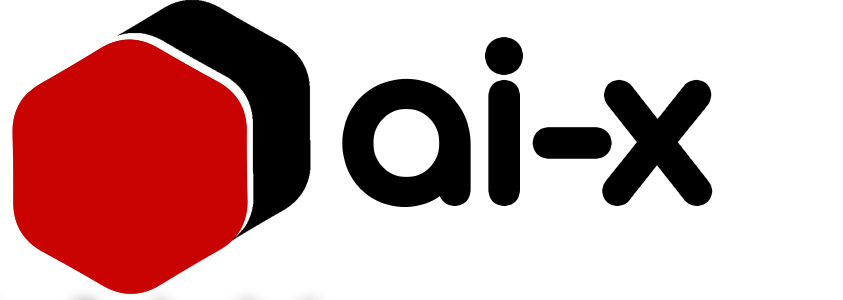
<style>
.page{position:relative;width:843px;height:300px;background:#ffffff}
.page>*{position:absolute;margin:0}
.t1{font:201.2px "Comfortaa-Regular";color:#000000}
</style>
<div class="page">
<p class="t1" style="left:350px;top:45px;width:355px;height:154px">ai-x</p>
</div>
